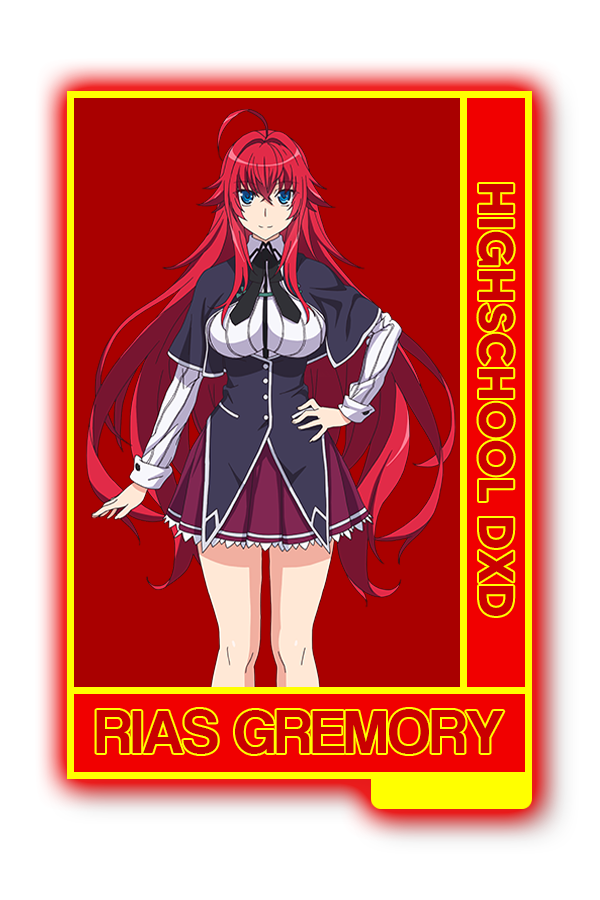
<style>
.page{position:relative;width:600px;height:900px;background:#a90000}
.page>*{position:absolute;margin:0}
.t1{font:48.8px "MADETOMMY-Bold";color:#ca0000}
.t2{font:62.6px "CoolveticaRg-Regular";color:#ca0000}
</style>
<div class="page">
<p class="t1" style="left:478px;top:184px;width:36px;height:432px;rotate:90deg">HIGHSCHOOL DXD</p>
<p class="t2" style="left:96px;top:709px;width:408px;height:45px">RIAS GREMORY</p>
</div>
